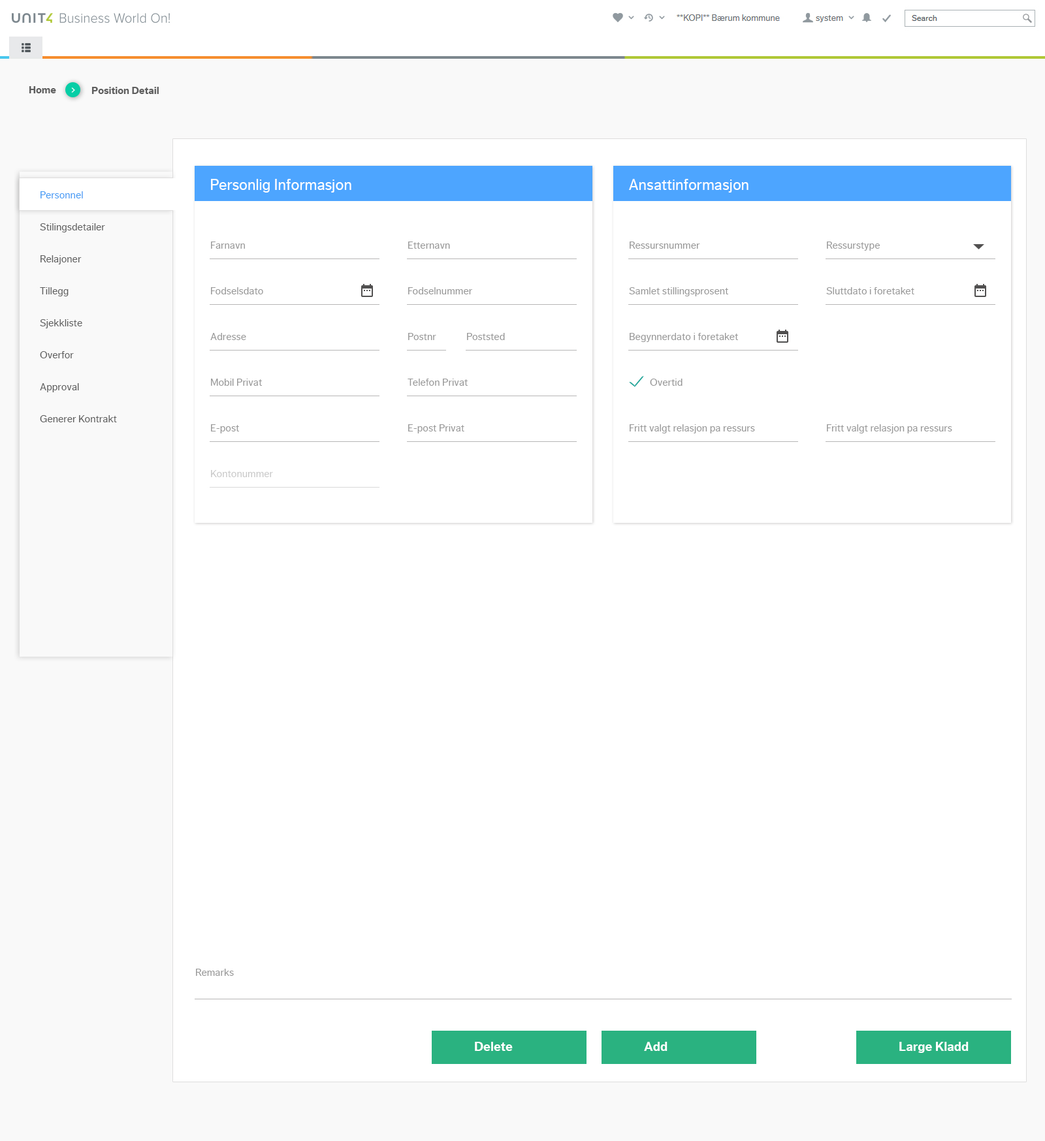
<style>
.page{position:relative;width:1045px;height:1141px;background:#ffffff}
.page>*{position:absolute;margin:0}
.t1{font:10.4px "DagnyCompPro-Bold";color:#5e5e5e}
.t2{font:15.7px "DagnyCompPro";color:#ffffff}
.t3{font:10.4px/32px "DagnyCompPro";color:#5e5e5e}
.t4{font:10.4px/32px "DagnyCompPro";color:#449cf5}
.t5{font:10.4px "DagnyCompPro";color:#989898}
.t6{font:10.4px "DagnyCompPro";color:#c9c9c9}
.t7{font:13.1px "DagnyCompPro-Bold";color:#ffffff}
</style>
<div class="page">
<p class="t1" style="left:29px;top:86px;width:27px;height:7px">Home</p>
<p class="t1" style="left:91px;top:87px;width:68px;height:7px">Position Detail</p>
<p class="t2" style="left:211px;top:179px;width:140px;height:14px">Personlig Informasjon</p>
<p class="t2" style="left:629px;top:179px;width:119px;height:14px">Ansattinformasjon</p>
<p class="t3" style="left:40px;top:191px;width:77px;height:231px"><span class="t4">Personnel<br></span>Stilingsdetailer<br>Relajoner<br>Tillegg  <br>Sjekkliste<br>Overfor<br>Approval<br>Generer Kontrakt</p>
<p class="t5" style="left:211px;top:242px;width:34px;height:7px">Farnavn</p>
<p class="t5" style="left:408px;top:242px;width:42px;height:7px">Etternavn</p>
<p class="t5" style="left:629px;top:242px;width:71px;height:7px">Ressursnummer</p>
<p class="t5" style="left:827px;top:242px;width:53px;height:9px">Ressurstype</p>
<p class="t5" style="left:211px;top:287px;width:52px;height:7px">Fodselsdato</p>
<p class="t5" style="left:408px;top:287px;width:64px;height:7px">Fodselnummer</p>
<p class="t5" style="left:629px;top:287px;width:99px;height:9px">Samlet stillingsprosent</p>
<p class="t5" style="left:826px;top:287px;width:88px;height:7px">Sluttdato i foretaket</p>
<p class="t5" style="left:210px;top:333px;width:36px;height:7px">Adresse</p>
<p class="t5" style="left:408px;top:333px;width:28px;height:7px">Postnr</p>
<p class="t5" style="left:467px;top:333px;width:38px;height:7px">Poststed</p>
<p class="t5" style="left:629px;top:333px;width:109px;height:9px">Begynnerdato i foretaket</p>
<p class="t5" style="left:211px;top:379px;width:51px;height:7px">Mobil Privat</p>
<p class="t5" style="left:407px;top:379px;width:61px;height:7px">Telefon Privat</p>
<p class="t5" style="left:650px;top:379px;width:32px;height:7px">Overtid</p>
<p class="t5" style="left:211px;top:424px;width:28px;height:10px">E-post</p>
<p class="t5" style="left:408px;top:424px;width:56px;height:10px">E-post Privat</p>
<p class="t5" style="left:629px;top:424px;width:126px;height:10px">Fritt valgt relasjon pa ressurs</p>
<p class="t5" style="left:827px;top:424px;width:125px;height:10px">Fritt valgt relasjon pa ressurs</p>
<p class="t6" style="left:211px;top:470px;width:62px;height:7px">Kontonummer</p>
<p class="t5" style="left:196px;top:969px;width:38px;height:7px">Remarks</p>
<p class="t7" style="left:475px;top:1042px;width:38px;height:9px">Delete</p>
<p class="t7" style="left:644px;top:1042px;width:23px;height:9px">Add</p>
<p class="t7" style="left:899px;top:1042px;width:69px;height:11px">Large Kladd</p>
</div>
